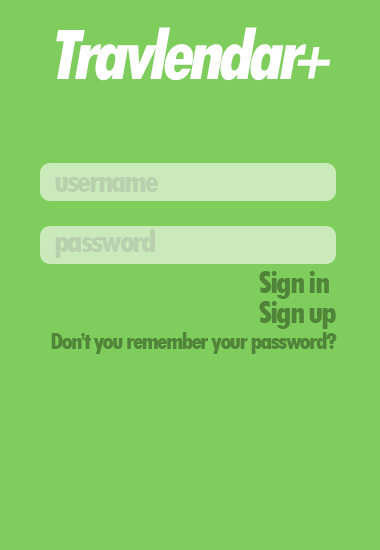
<style>
.page{position:relative;width:380px;height:550px;background:#7fcd5c}
.page>*{position:absolute;margin:0}
.t1{font:75px "TwCenMT-CondensedExtraBold";letter-spacing:-0.075em;color:#ffffff;font-style:italic}
.t2{font:58.3px "TwCenMT-CondensedExtraBold";letter-spacing:-0.075em;color:#ffffff;font-style:italic}
.t3{font:33.3px "TwCenMT-CondensedExtraBold";letter-spacing:-0.075em;color:#b9d0af}
.t4{font:33.3px "TwCenMT-CondensedExtraBold";letter-spacing:-0.075em;color:#508439}
.t5{font:25px "TwCenMT-CondensedExtraBold";letter-spacing:-0.075em;color:#508439}
</style>
<div class="page">
<p class="t1" style="left:56px;top:27px;width:251px;height:54px">Travlendar</p>
<p class="t2" style="left:297px;top:47px;width:34px;height:32px">+</p>
<p class="t3" style="left:55px;top:177px;width:104px;height:15px">username</p>
<p class="t3" style="left:55px;top:229px;width:100px;height:29px">password</p>
<p class="t4" style="left:259px;top:271px;width:70px;height:28px">Sign in</p>
<p class="t4" style="left:259px;top:301px;width:77px;height:28px">Sign up</p>
<p class="t5" style="left:51px;top:332px;width:286px;height:22px">Don’t you remember your password?</p>
</div>
